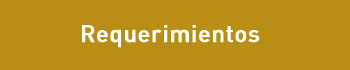
<style>
.page{position:relative;width:350px;height:70px;background:#b88e15}
.page>*{position:absolute;margin:0}
.t1{font:24px "DINPro-Medium";color:#ffffff;font-weight:bold}
</style>
<div class="page">
<p class="t1" style="left:82px;top:25px;width:178px;height:23px">Requerimientos</p>
</div>
